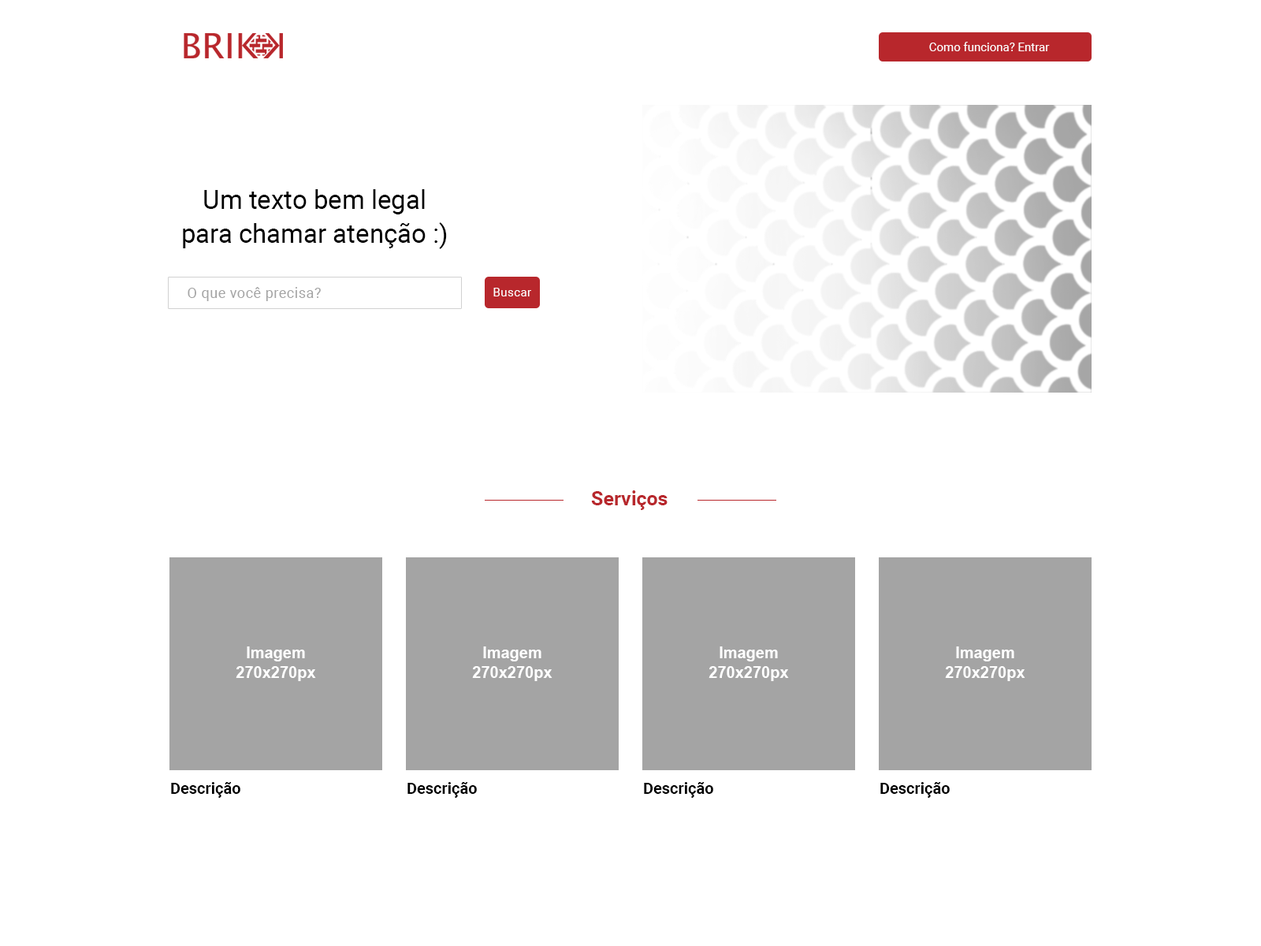
<style>
.page{position:relative;width:1261px;height:946px;background:#ffffff}
.page>*{position:absolute;margin:0}
.t1{font:11.8px "Roboto-Regular";color:#ffffff}
.t2{font:26px/33.5px "Roboto-Regular";color:#000000}
.t3{font:14.2px "Roboto-Regular";letter-spacing:0.03em;color:#a4a4a4}
.t4{font:11.8px "Roboto-Regular";letter-spacing:0.03em;color:#ffffff}
.t5{font:19.7px "Roboto-Bold";color:#b8272c}
.t6{font:15.8px/19.7px "Arial-BoldMT";color:#ffffff}
.t7{font:15.8px "Roboto-Bold";color:#000000}
</style>
<div class="page">
<p class="t1" style="left:929px;top:42px;width:121px;height:9px">Como funciona? Entrar</p>
<p class="t2" style="left:183px;top:189px;width:264px;height:60px;text-align:center">Um texto bem legal<br>para chamar atenção :)</p>
<p class="t3" style="left:188px;top:287px;width:133px;height:14px">O que você precisa?</p>
<p class="t4" style="left:493px;top:288px;width:38px;height:8px">Buscar</p>
<p class="t5" style="left:591px;top:490px;width:76px;height:20px">Serviços</p>
<p class="t6" style="left:236px;top:646px;width:80px;height:35px;text-align:center">Imagem<br>270x270px</p>
<p class="t6" style="left:472px;top:646px;width:80px;height:35px;text-align:center">Imagem<br>270x270px</p>
<p class="t6" style="left:708px;top:646px;width:81px;height:35px;text-align:center">Imagem<br>270x270px</p>
<p class="t6" style="left:945px;top:646px;width:80px;height:35px;text-align:center">Imagem<br>270x270px</p>
<p class="t7" style="left:171px;top:782px;width:69px;height:16px">Descrição</p>
<p class="t7" style="left:407px;top:782px;width:70px;height:16px">Descrição</p>
<p class="t7" style="left:644px;top:782px;width:69px;height:16px">Descrição</p>
<p class="t7" style="left:880px;top:782px;width:70px;height:16px">Descrição</p>
</div>
